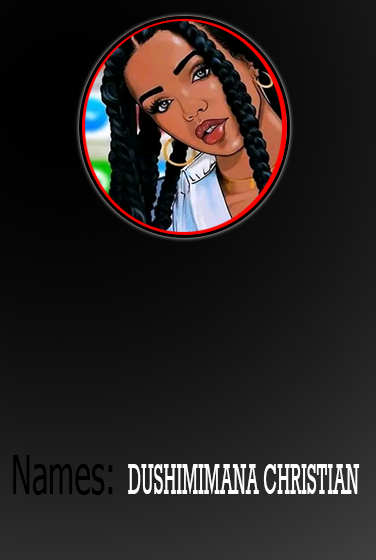
<style>
.page{position:relative;width:376px;height:560px}
.page>*{position:absolute;margin:0}
.t1{font:52.8px "Tahoma";color:#000000;scale:0.59 1}
.t2{font:44.3px "Rockwell";color:#ffffff;scale:0.41 1}
</style>
<div class="page">
<p class="t1" style="left:13px;top:455px;width:100px;height:40px">Names:</p>
<p class="t2" style="left:128px;top:464px;width:232px;height:30px">DUSHIMIMANA CHRISTIAN</p>
</div>
